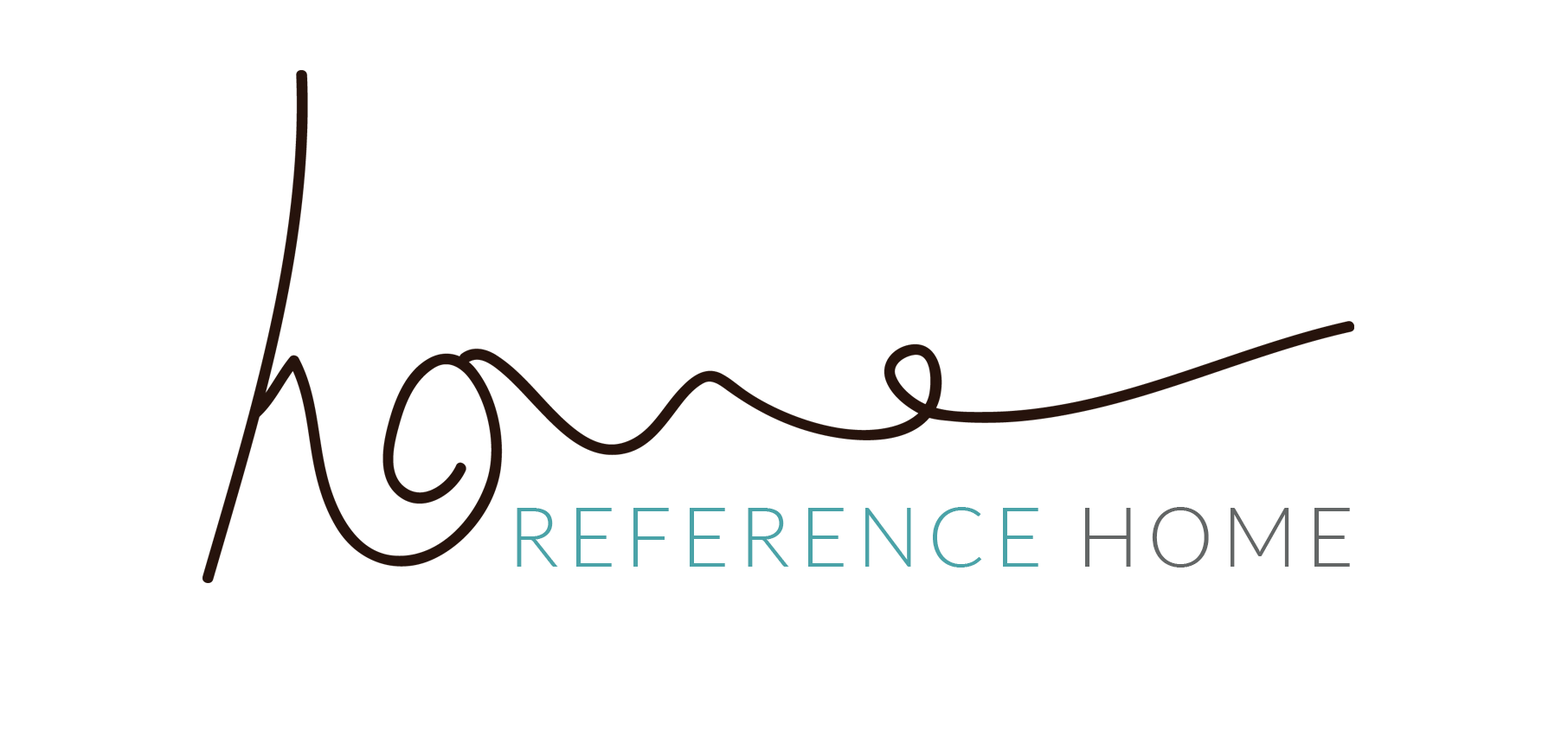
<style>
.page{position:relative;width:1568px;height:744px;background:#ffffff}
.page>*{position:absolute;margin:0}
.t1{font:83.1px "Lato-Light";letter-spacing:0.1em;color:#4aa3a8}
.t2{font:83.1px "Lato-Light";letter-spacing:0.1em;color:#636666}
</style>
<div class="page">
<p class="t1" style="left:517px;top:507px;width:833px;height:61px">REFERENCE <span class="t2">HOME</span></p>
</div>
